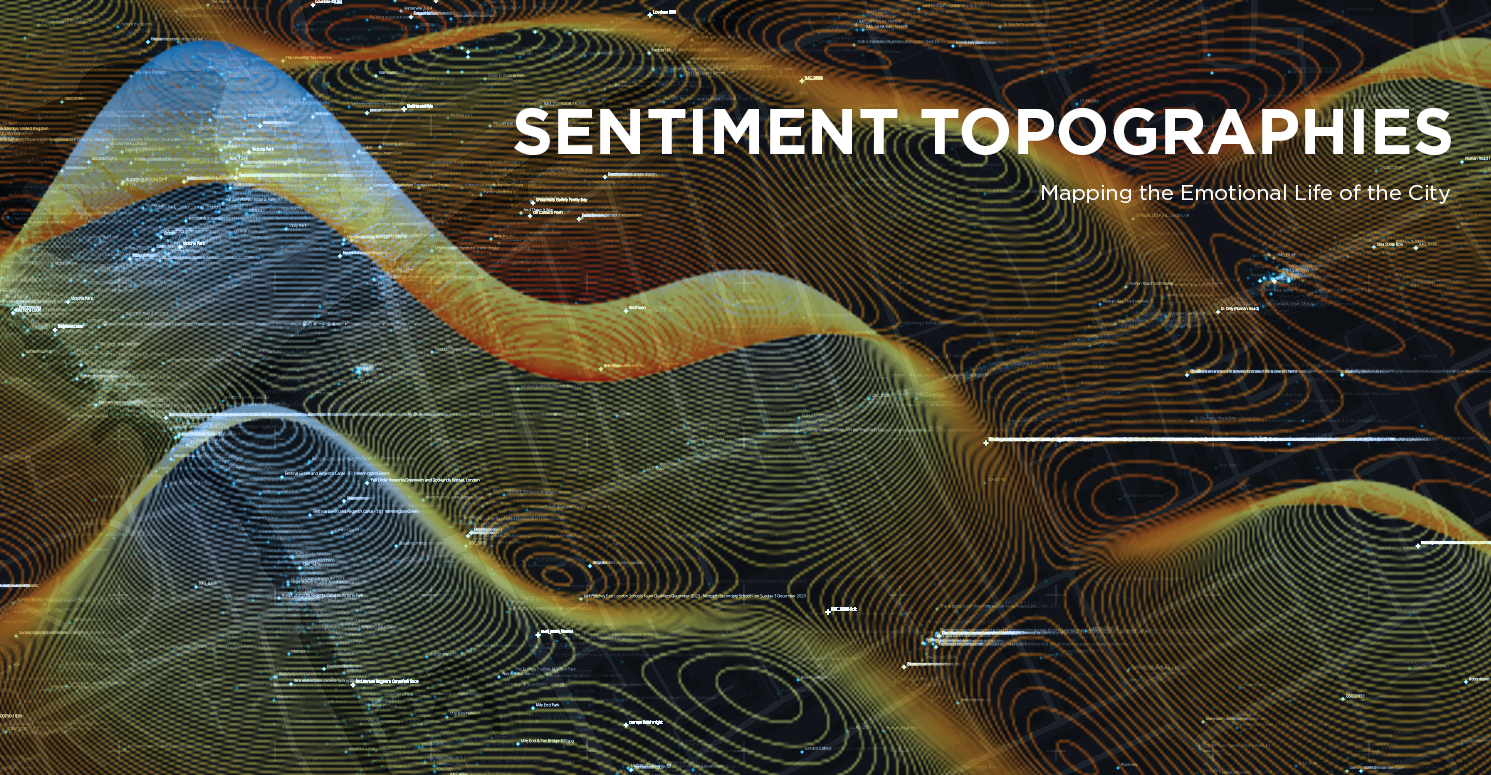
<style>
.page{position:relative;width:1491px;height:775px}
.page>*{position:absolute;margin:0}
.t1{font:64px "Gotham-Bold";color:#ffffff}
.t2{font:21.3px "Gotham-Book";color:#ffffff}
</style>
<div class="page">
<p class="t1" style="left:514px;top:108px;width:937px;height:47px">SENTIMENT TOPOGRAPHIES</p>
<p class="t2" style="left:1042px;top:184px;width:408px;height:20px">Mapping the Emotional Life of the City</p>
</div>
